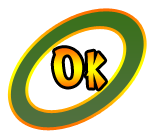
<style>
.page{position:relative;width:156px;height:140px;background:#ffffff}
.page>*{position:absolute;margin:0}
.t1{font:48px "CosmicTwoPlain"}
</style>
<div class="page">
<p class="t1" style="left:53px;top:48px;width:52px;height:41px">Ok</p>
</div>
